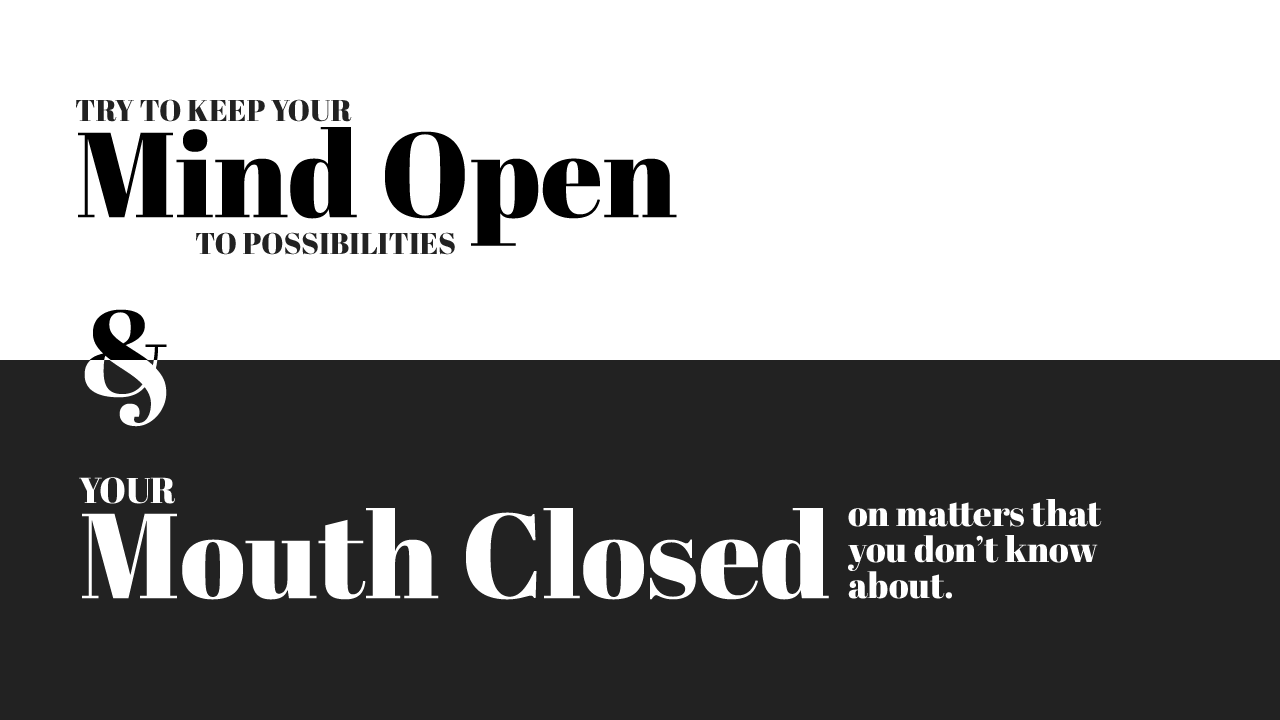
<style>
.page{position:relative;width:1280px;height:720px;background:#ffffff}
.page>*{position:absolute;margin:0}
.t1{font:30px "AbrilFatface-Regular";color:#222222;text-transform:uppercase}
.t2{font:120px "AbrilFatface-Regular";color:#000000}
.t3{font:36px "AbrilFatface-Regular";color:#ffffff}
.t4{font:120px "AbrilFatface-Regular";color:#ffffff}
.t5{font:36px/36px "AbrilFatface-Regular";color:#ffffff}
</style>
<div class="page">
<p class="t1" style="left:76px;top:99px;width:276px;height:23px">Try to keep your</p>
<p class="t2" style="left:78px;top:127px;width:599px;height:119px">Mind Open</p>
<p class="t1" style="left:196px;top:232px;width:259px;height:23px">TO possibilities</p>
<p class="t3" style="left:79px;top:477px;width:96px;height:27px">YOUR</p>
<p class="t4" style="left:82px;top:508px;width:747px;height:92px">Mouth Closed</p>
<p class="t5" style="left:848px;top:499px;width:254px;height:100px">on matters that <br>you don’t know<br>about.</p>
</div>
